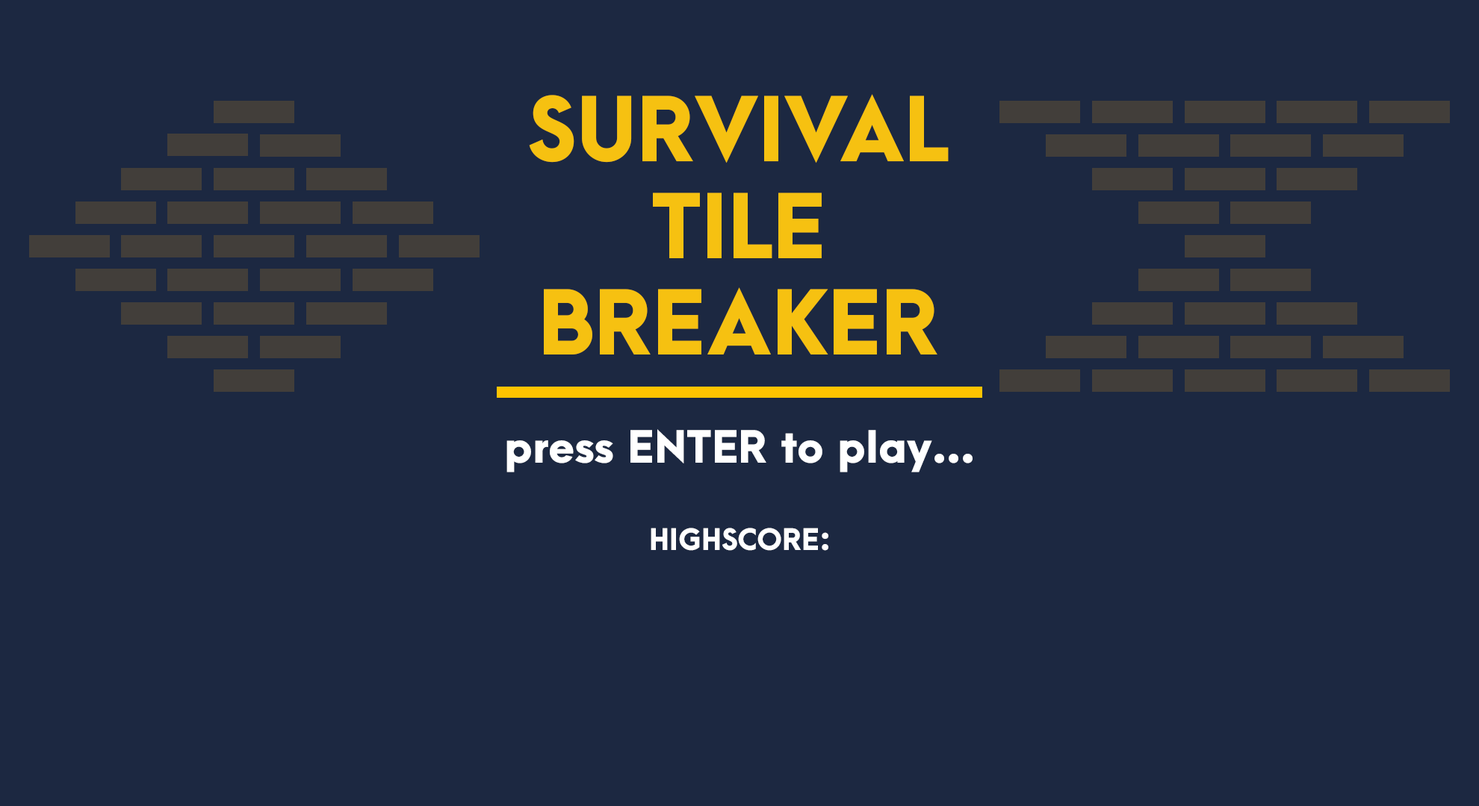
<style>
.page{position:relative;width:1479px;height:806px;background:#1c2841}
.page>*{position:absolute;margin:0}
.t1{font:80.6px "ArcaMajora3-Heavy";color:#f6c111;scale:1.03 1}
.t2{font:40.3px "ArcaMajora3-Heavy";color:#ffffff;scale:1.03 1}
.t3{font:26.9px "ArcaMajora3-Heavy";color:#ffffff;scale:1.03 1}
</style>
<div class="page">
<p class="t1" style="left:529px;top:94px;width:419px;height:261px;text-align:center">SURVIVAL<br>TILE<br>BREAKER</p>
<p class="t2" style="left:506px;top:429px;width:466px;height:44px">press ENTER to play...</p>
<p class="t3" style="left:650px;top:528px;width:178px;height:23px">HIGHSCORE:</p>
</div>
